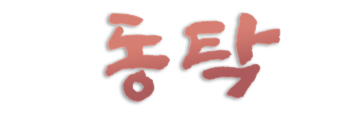
<style>
.page{position:relative;width:360px;height:120px;background:#ffffff}
.page>*{position:absolute;margin:0}
.t1{font:101.2px "SangSangRockOTF";letter-spacing:0.12em;color:#c9726a}
.t2{font:106.2px "SangSangRockOTF";letter-spacing:0.12em;color:#c9726a}
</style>
<div class="page">
<p class="t1" style="left:105px;top:13px;width:175px;height:88px">동<span class="t2">탁</span></p>
</div>
